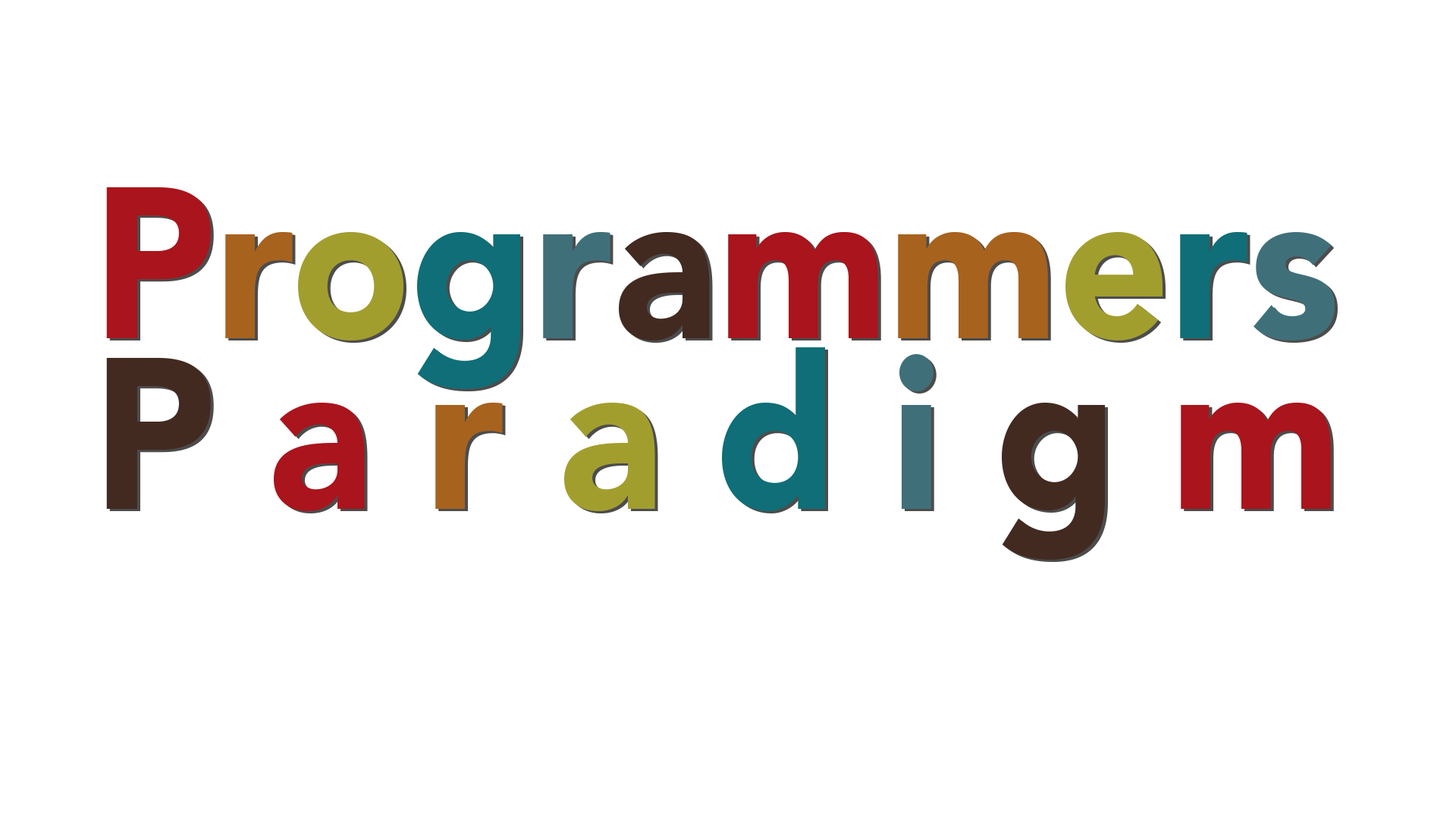
<style>
.page{position:relative;width:1456px;height:819px;background:#ffffff}
.page>*{position:absolute;margin:0}
.t1{font:213.3px/170.6px "AvenirLTStd-Black";scale:0.92 1}
.t2{font:213.3px/170.6px "AvenirLTStd-Black";letter-spacing:0.27em;scale:0.92 1}
</style>
<div class="page">
<p class="t1" style="left:106px;top:187px;width:1229px;height:373px">Programmers<br><span class="t2">P</span><span class="t2">a</span><span class="t2">r</span><span class="t2">a</span><span class="t2">d</span><span class="t2">i</span><span class="t2">g</span><span class="t2">m</span></p>
</div>
